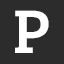
<style>
.page{position:relative;width:64px;height:64px;background:#2c2c2c}
.page>*{position:absolute;margin:0}
.t1{font:63.5px "BreeSerif-Regular";color:#ffffff}
</style>
<div class="page">
<p class="t1" style="left:15px;top:10px;width:34px;height:43px">P</p>
</div>
